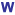
<style>
.page{position:relative;width:15px;height:15px;background:#ffffff}
.page>*{position:absolute;margin:0}
.t1{font:14px "Arial-BoldMT";letter-spacing:-0.05em;color:#333399}
</style>
<div class="page">
<p class="t1" style="left:1px;top:2px;width:14px;height:11px">W</p>
</div>
